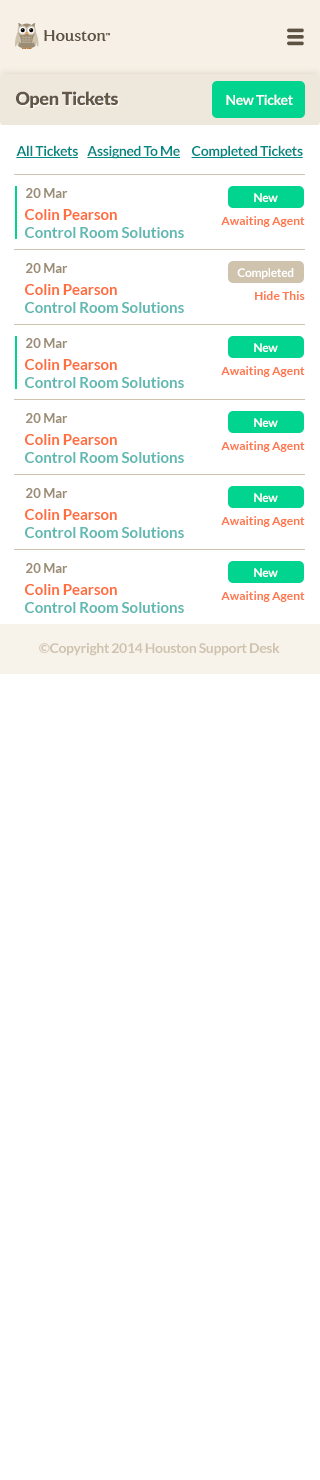
<style>
.page{position:relative;width:320px;height:1480px;background:#ffffff}
.page>*{position:absolute;margin:0}
.t1{font:18px "Lato-Black";letter-spacing:-0.025em;color:#635748}
.t2{font:14px "Lato-Bold";letter-spacing:-0.025em;color:#ffffff}
.t3{font:14px "Lato-Bold";letter-spacing:-0.025em;color:#008884;text-decoration:underline}
.t4{font:13px "Lato-Bold";color:#9b8d75}
.t5{font:12px "Lato-Bold";letter-spacing:-0.025em;color:#ffffff}
.t6{font:15px "Lato-Bold";color:#60b9b2}
.t7{font:15px "Lato-Bold";color:#ff6e3e}
.t8{font:12px "Lato-Bold";color:#ff774c}
.t9{font:13.7px "Lato-Bold";letter-spacing:-0.025em;color:#cfc3af}
</style>
<div class="page">
<p class="t1" style="left:16px;top:91px;width:102px;height:17px">Open Tickets</p>
<p class="t2" style="left:226px;top:94px;width:67px;height:11px">New Ticket</p>
<p class="t3" style="left:16px;top:145px;width:287px;height:14px">All Tickets    Assigned To Me     Completed Tickets</p>
<p class="t4" style="left:26px;top:188px;width:42px;height:10px">20 Mar</p>
<p class="t5" style="left:254px;top:193px;width:24px;height:9px">New</p>
<p class="t6" style="left:24px;top:209px;width:160px;height:29px"><span class="t7">Colin Pearson<br></span>Control Room Solutions</p>
<p class="t8" style="left:221px;top:216px;width:84px;height:11px">Awaiting Agent</p>
<p class="t4" style="left:26px;top:263px;width:42px;height:10px">20 Mar</p>
<p class="t5" style="left:237px;top:268px;width:57px;height:11px">Completed</p>
<p class="t6" style="left:24px;top:284px;width:160px;height:29px"><span class="t7">Colin Pearson<br></span>Control Room Solutions</p>
<p class="t8" style="left:255px;top:291px;width:50px;height:9px">Hide This</p>
<p class="t4" style="left:26px;top:338px;width:42px;height:10px">20 Mar</p>
<p class="t5" style="left:254px;top:343px;width:24px;height:9px">New</p>
<p class="t6" style="left:24px;top:359px;width:160px;height:29px"><span class="t7">Colin Pearson<br></span>Control Room Solutions</p>
<p class="t8" style="left:221px;top:366px;width:84px;height:11px">Awaiting Agent</p>
<p class="t4" style="left:26px;top:413px;width:42px;height:10px">20 Mar</p>
<p class="t5" style="left:254px;top:418px;width:24px;height:9px">New</p>
<p class="t6" style="left:24px;top:434px;width:160px;height:29px"><span class="t7">Colin Pearson<br></span>Control Room Solutions</p>
<p class="t8" style="left:221px;top:441px;width:84px;height:11px">Awaiting Agent</p>
<p class="t4" style="left:26px;top:488px;width:42px;height:10px">20 Mar</p>
<p class="t5" style="left:254px;top:493px;width:24px;height:9px">New</p>
<p class="t6" style="left:24px;top:509px;width:160px;height:29px"><span class="t7">Colin Pearson<br></span>Control Room Solutions</p>
<p class="t8" style="left:221px;top:516px;width:84px;height:11px">Awaiting Agent</p>
<p class="t4" style="left:26px;top:563px;width:42px;height:10px">20 Mar</p>
<p class="t5" style="left:254px;top:568px;width:24px;height:9px">New</p>
<p class="t6" style="left:24px;top:584px;width:160px;height:29px"><span class="t7">Colin Pearson<br></span>Control Room Solutions</p>
<p class="t8" style="left:221px;top:591px;width:84px;height:11px">Awaiting Agent</p>
<p class="t9" style="left:39px;top:643px;width:241px;height:13px">©Copyright 2014 Houston Support Desk</p>
</div>
